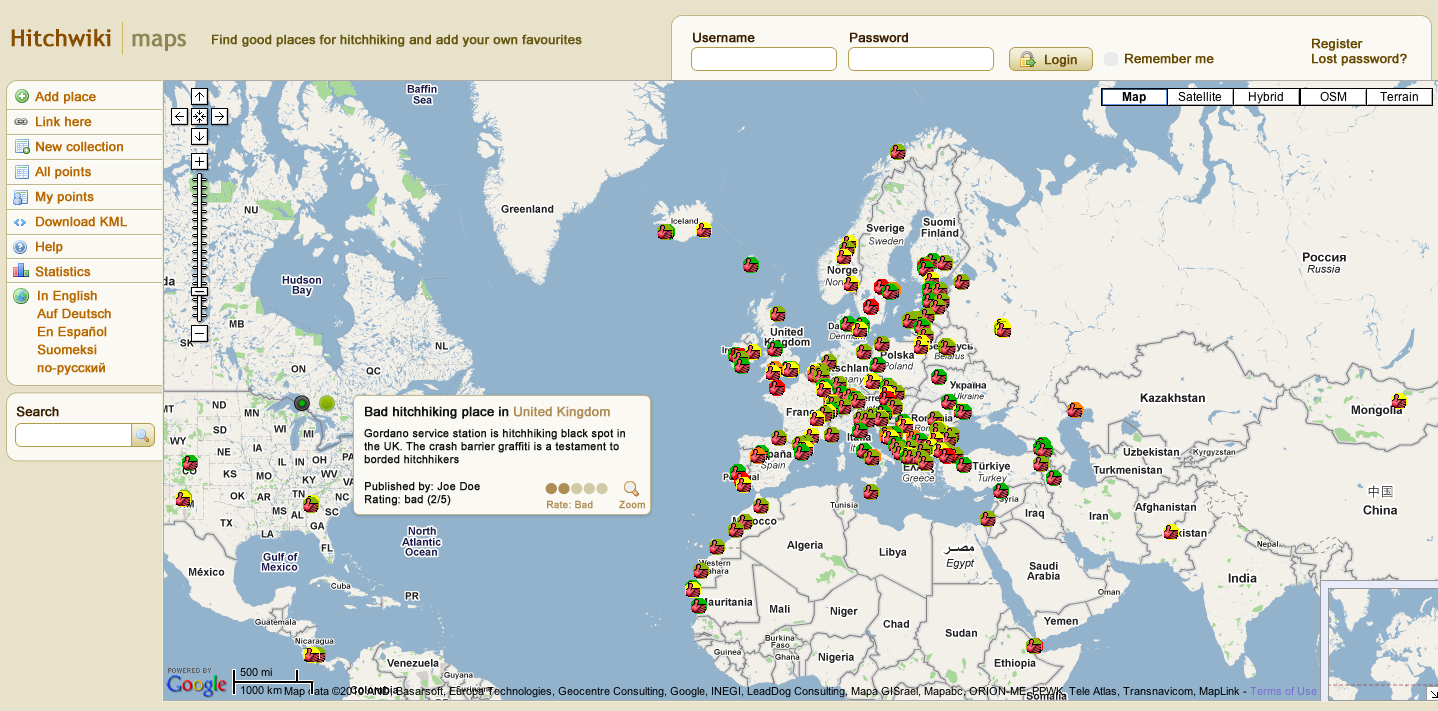
<style>
.page{position:relative;width:1438px;height:711px;background:#f3efe9}
.page>*{position:absolute;margin:0}
.t1{font:23px "TrebuchetMS";color:#884d00;font-weight:bold}
.t2{font:23px "TrebuchetMS";color:#8f8556;font-weight:bold}
.t3{font:13px "ArialMT";color:#63550e;font-weight:bold}
.t4{font:13px "ArialMT";color:#391e00;font-weight:bold}
.t5{font:13px "ArialMT";color:#684a02;font-weight:bold}
.t6{font:13px/25px "ArialMT";color:#b76801;font-weight:bold}
.t7{font:13px/18px "ArialMT";color:#b76801;font-weight:bold}
.t8{font:13px "ArialMT";color:#111111;font-weight:bold}
.t9{font:13px "ArialMT";color:#ae8c55;font-weight:bold}
.t10{font:11px "ArialMT";color:#111111;font-weight:bold}
.t11{font:10px "ArialMT";color:#ad8c55;font-weight:bold}
</style>
<div class="page">
<p class="t1" style="left:11px;top:29px;width:100px;height:18px">Hitchwiki</p>
<p class="t2" style="left:132px;top:33px;width:54px;height:18px">maps</p>
<p class="t3" style="left:212px;top:34px;width:370px;height:13px">Find good places for hitchhiking and add your own favourites</p>
<p class="t4" style="left:693px;top:32px;width:62px;height:11px">Username</p>
<p class="t4" style="left:850px;top:32px;width:58px;height:11px">Password</p>
<p class="t5" style="left:1312px;top:38px;width:95px;height:28px;text-align:justify">Register<br>Lost password?</p>
<p class="t5" style="left:1045px;top:54px;width:32px;height:13px">Login</p>
<p class="t5" style="left:1125px;top:53px;width:89px;height:11px">Remember me</p>
<p class="t6" style="left:35px;top:91px;width:92px;height:186px;text-align:justify">Add place<br>Link here<br>New collection<br>All points<br>My points<br>Download KML<br>Help<br>Statistics</p>
<p class="t7" style="left:37px;top:290px;width:74px;height:85px;text-align:justify">In English<br>Auf Deutsch<br>En Español<br>Suomeksi<br>по-pусский</p>
<p class="t4" style="left:16px;top:406px;width:43px;height:11px">Search</p>
<p class="t8" style="left:365px;top:406px;width:245px;height:13px">Bad hitchhiking place in <span class="t9">United Kingdom</span></p>
<p class="t10" style="left:364px;top:429px;width:261px;height:77px">Gordano service station is hitchhiking black spot in the UK. The crash barrier graffiti is a testament to borded hitchhikers<br><br>Published by: Joe Doe<br>Rating: bad (2/5)</p>
<p class="t11" style="left:547px;top:500px;width:46px;height:9px">Rate: Bad</p>
<p class="t11" style="left:619px;top:500px;width:26px;height:9px">Zoom</p>
</div>
